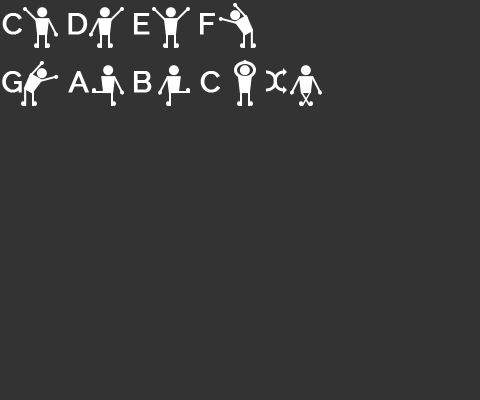
<style>
.page{position:relative;width:480px;height:400px;background:#333333}
.page>*{position:absolute;margin:0}
.t1{font:30px "Raleway-Medium";color:#ffffff;font-weight:bold}
</style>
<div class="page">
<p class="t1" style="left:2px;top:13px;width:20px;height:22px">C</p>
<p class="t1" style="left:68px;top:13px;width:20px;height:22px">D</p>
<p class="t1" style="left:134px;top:13px;width:16px;height:22px">E</p>
<p class="t1" style="left:200px;top:13px;width:15px;height:22px">F</p>
<p class="t1" style="left:2px;top:71px;width:20px;height:22px">G</p>
<p class="t1" style="left:68px;top:71px;width:21px;height:22px">A</p>
<p class="t1" style="left:134px;top:71px;width:18px;height:22px">B</p>
<p class="t1" style="left:200px;top:71px;width:20px;height:22px">C</p>
</div>
